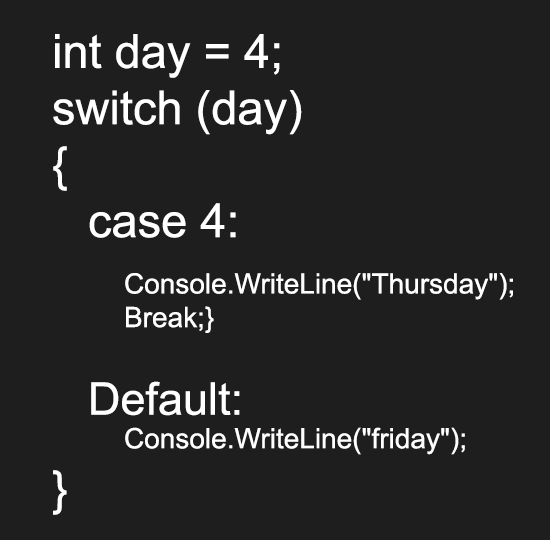
<style>
.page{position:relative;width:550px;height:540px;background:#1e1e1e}
.page>*{position:absolute;margin:0}
.t1{font:28px "ArialMT";color:#ffffff}
.t2{font:47px "ArialMT";color:#ffffff}
.t3{font:45px "ArialMT";color:#ffffff}
</style>
<div class="page">
<p class="t1" style="left:53px;top:34px;width:460px;height:481px"><span class="t2">int day = 4;<br>switch (day)<br>{<br> case 4:<br>  </span>Console.WriteLine("Thursday");<br>     Break;}<br><br> <span class="t3">Default:<br></span>  Console.WriteLine("friday");<br><span class="t2">}</span></p>
</div>
